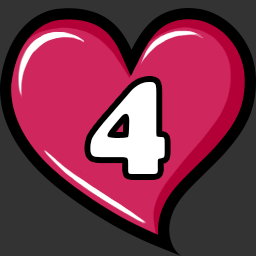
<style>
.page{position:relative;width:256px;height:256px;background:#333333}
.page>*{position:absolute;margin:0}
.t1{font:125px "AGCrownStyle-Roman";color:#ffffff}
</style>
<div class="page">
<p class="t1" style="left:90px;top:82px;width:75px;height:92px">4</p>
</div>
